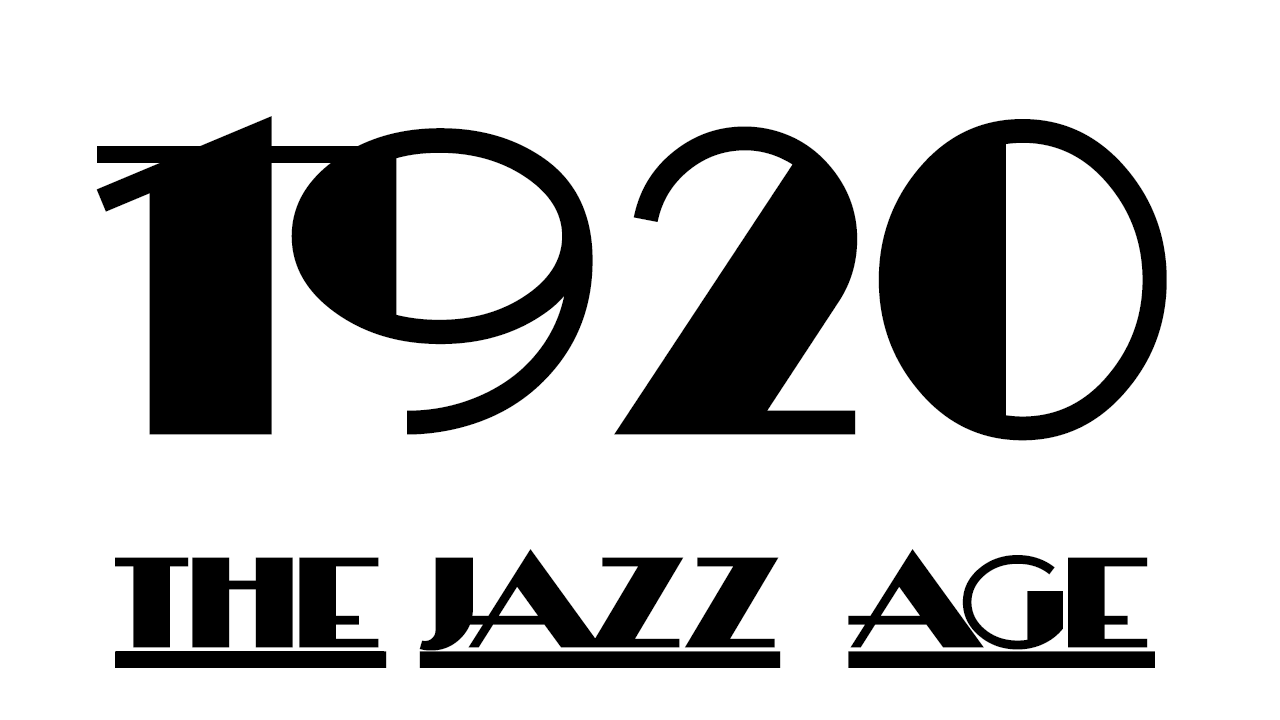
<style>
.page{position:relative;width:1280px;height:720px;background:#ffffff}
.page>*{position:absolute;margin:0}
.t1{font:416.7px "HeraldSquare";color:#000000}
.t2{font:150px "HeraldSquare";color:#000000}
</style>
<div class="page">
<p class="t1" style="left:96px;top:116px;width:1071px;height:325px">1920</p>
<p class="t2" style="left:115px;top:549px;width:1040px;height:119px">the jazz   age</p>
</div>
